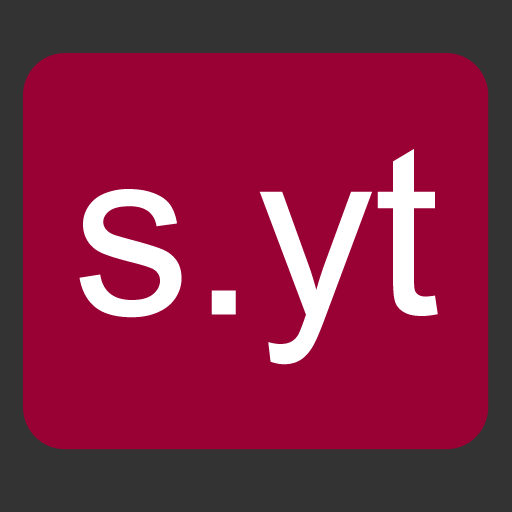
<style>
.page{position:relative;width:512px;height:512px;background:#990033}
.page>*{position:absolute;margin:0}
.t1{font:235.9px "ArialMT";color:#ffffff}
</style>
<div class="page">
<p class="t1" style="left:79px;top:149px;width:359px;height:216px">s.yt</p>
</div>
